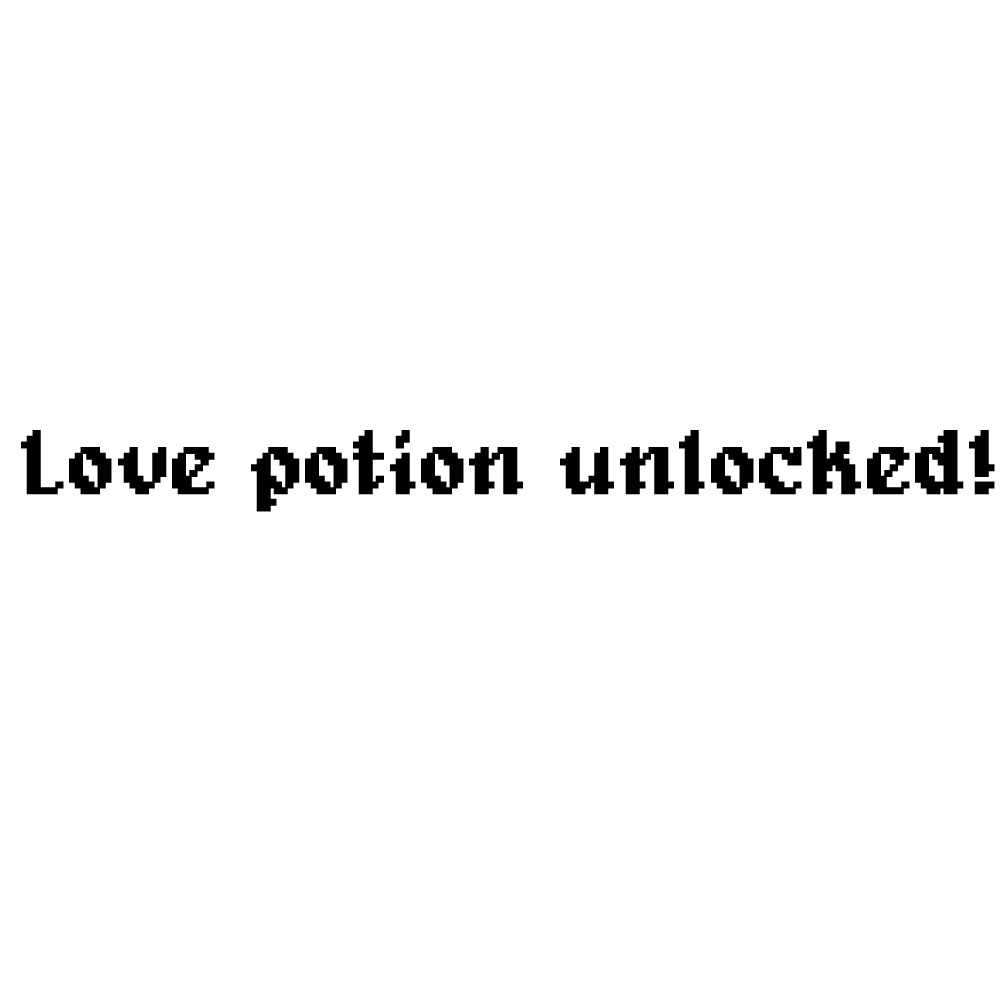
<style>
.page{position:relative;width:1000px;height:1000px;background:#ffffff}
.page>*{position:absolute;margin:0}
.t1{font:91.8px "Alagard";color:#000000;font-weight:bold}
</style>
<div class="page">
<p class="t1" style="left:21px;top:430px;width:974px;height:82px">Love potion unlocked!</p>
</div>
